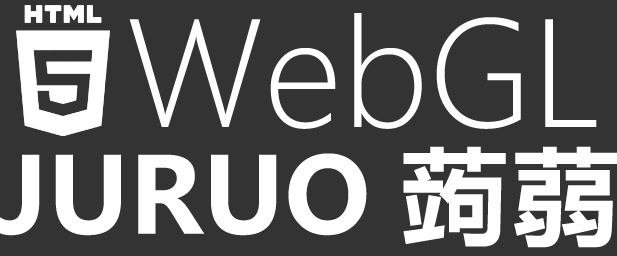
<style>
.page{position:relative;width:617px;height:256px;background:#333333}
.page>*{position:absolute;margin:0}
.t1{font:142.3px "MicrosoftYaHeiLight";letter-spacing:0.001em;color:#fffefe}
.t2{font:104.3px "MicrosoftYaHei-Bold";color:#ffffff}
.t3{font:104.3px "MicrosoftYaHei-Bold";letter-spacing:0.06em;color:#ffffff}
</style>
<div class="page">
<p class="t1" style="left:129px;top:13px;width:468px;height:116px">WebGL</p>
<p class="t2" style="left:0px;top:146px;width:618px;height:102px">JURUO <span class="t3">蒟蒻</span></p>
</div>
